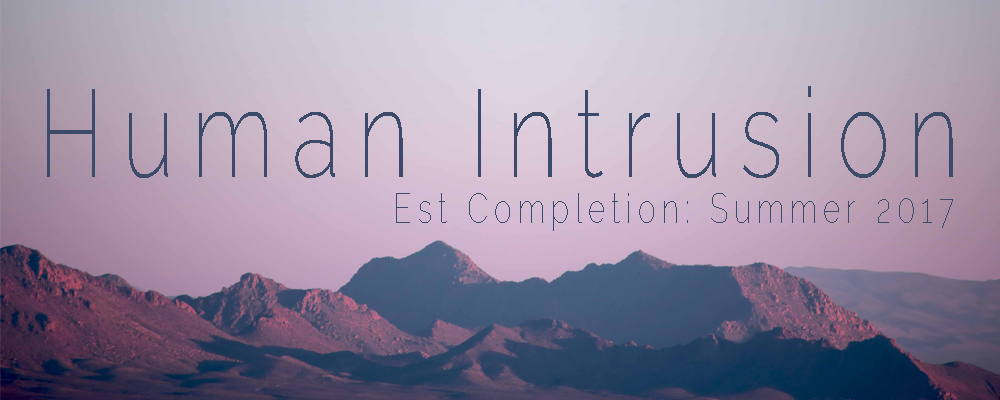
<style>
.page{position:relative;width:1000px;height:400px}
.page>*{position:absolute;margin:0}
.t1{font:123.8px "Raleway-ExtraLight";letter-spacing:0.2em;color:#3b4b69;scale:0.73 1}
.t2{font:41.2px "Raleway-Thin";letter-spacing:0.2em;color:#3b4b69;scale:0.73 1}
</style>
<div class="page">
<p class="t1" style="left:47px;top:86px;width:906px;height:92px">Human Intrusion</p>
<p class="t2" style="left:396px;top:193px;width:557px;height:38px">Est Completion: Summer 2017</p>
</div>
